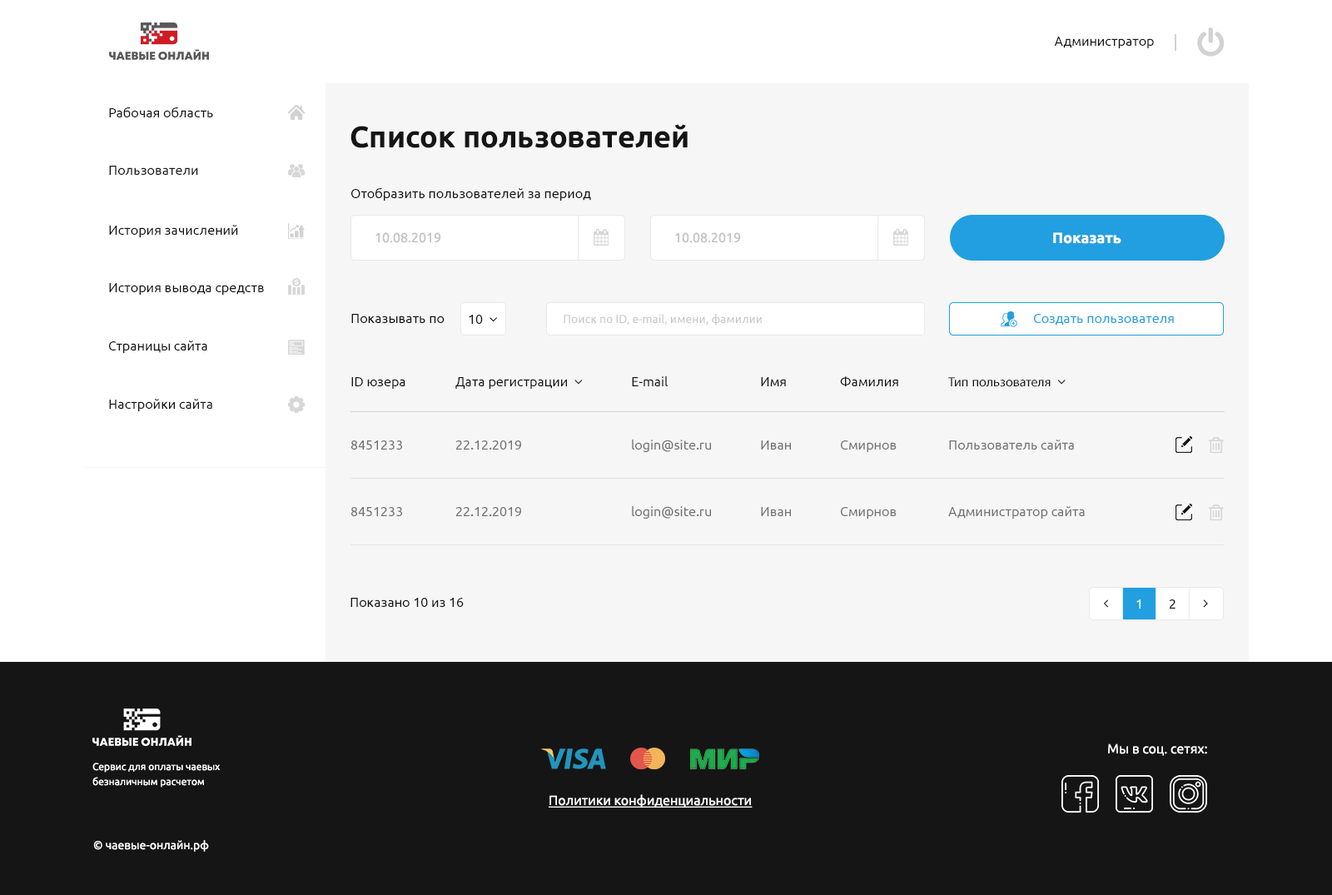
<style>
.page{position:relative;width:1332px;height:895px;background:#f6f6f6}
.page>*{position:absolute;margin:0}
.t1{font:13.3px "Ubuntu-Regular";color:#151515}
.t2{font:30px "Ubuntu-Bold";color:#151515}
.t3{font:13.3px "Ubuntu-Regular";color:#c4c4c4}
.t4{font:15px "Ubuntu-Bold";color:#ffffff}
.t5{font:11.7px "Ubuntu-Regular";color:#c4c4c4}
.t6{font:13.3px "Ubuntu-Regular";color:#219fe0}
.t7{font:13.3px "Ubuntu-Regular";color:#717171}
.t8{font:13.3px "Ubuntu-Regular";color:#727272}
.t9{font:13.3px "Ubuntu-Regular";color:#ffffff}
.t10{font:10px/7.5px "Ubuntu-Regular";color:#ffffff}
.t11{font:13.3px "Ubuntu-Regular";color:#ffffff;text-decoration:underline}
.t12{font:11.7px "Ubuntu-Regular";color:#ffffff}
</style>
<div class="page">
<p class="t1" style="left:1054px;top:37px;width:100px;height:11px">Администратор</p>
<p class="t1" style="left:109px;top:107px;width:104px;height:10px">Рабочая область</p>
<p class="t2" style="left:351px;top:124px;width:337px;height:24px">Список пользователей</p>
<p class="t1" style="left:109px;top:166px;width:89px;height:9px">Пользователи</p>
<p class="t1" style="left:351px;top:187px;width:240px;height:14px">Отобразить пользователей за период</p>
<p class="t1" style="left:109px;top:225px;width:129px;height:12px">История зачислений</p>
<p class="t3" style="left:376px;top:232px;width:65px;height:11px">10.08.2019</p>
<p class="t3" style="left:675px;top:232px;width:66px;height:11px">10.08.2019</p>
<p class="t4" style="left:1053px;top:232px;width:69px;height:12px">Показать</p>
<p class="t1" style="left:109px;top:283px;width:155px;height:12px">История вывода средств</p>
<p class="t1" style="left:351px;top:314px;width:94px;height:9px">Показывать по</p>
<p class="t5" style="left:564px;top:314px;width:198px;height:12px">Поиск по ID, e-mail, имени, фамилии</p>
<p class="t6" style="left:1034px;top:314px;width:140px;height:12px">Создать пользователя</p>
<p class="t1" style="left:109px;top:341px;width:98px;height:12px">Страницы сайта</p>
<p class="t1" style="left:351px;top:377px;width:54px;height:12px">ID юзера</p>
<p class="t1" style="left:632px;top:376px;width:36px;height:10px">E-mail</p>
<p class="t1" style="left:761px;top:377px;width:25px;height:9px">Имя</p>
<p class="t1" style="left:840px;top:376px;width:58px;height:10px">Фамилия</p>
<p class="t1" style="left:109px;top:399px;width:103px;height:12px">Настройки сайта</p>
<p class="t7" style="left:351px;top:440px;width:51px;height:10px">8451233</p>
<p class="t8" style="left:455px;top:440px;width:66px;height:10px">22.12.2019</p>
<p class="t8" style="left:632px;top:439px;width:79px;height:13px">login@site.ru</p>
<p class="t8" style="left:761px;top:440px;width:30px;height:10px">Иван</p>
<p class="t8" style="left:841px;top:440px;width:56px;height:12px">Смирнов</p>
<p class="t8" style="left:949px;top:440px;width:125px;height:10px">Пользователь сайта</p>
<p class="t7" style="left:351px;top:507px;width:51px;height:9px">8451233</p>
<p class="t8" style="left:455px;top:507px;width:66px;height:9px">22.12.2019</p>
<p class="t8" style="left:632px;top:505px;width:79px;height:14px">login@site.ru</p>
<p class="t8" style="left:761px;top:507px;width:30px;height:9px">Иван</p>
<p class="t8" style="left:841px;top:507px;width:56px;height:12px">Смирнов</p>
<p class="t8" style="left:948px;top:506px;width:137px;height:13px">Администратор сайта</p>
<p class="t1" style="left:351px;top:598px;width:113px;height:9px">Показано 10 из 16</p>
<p class="t9" style="left:1137px;top:599px;width:4px;height:10px">1</p>
<p class="t1" style="left:1169px;top:599px;width:7px;height:10px">2</p>
<p class="t9" style="left:1108px;top:744px;width:99px;height:12px">Мы в соц. сетях:</p>
<p class="t10" style="left:92px;top:763px;width:129px;height:25px">Сервис для оплаты чаевых<br><br>безналичным расчетом</p>
<p class="t11" style="left:549px;top:794px;width:204px;height:14px">Политики конфиденциальности</p>
<p class="t12" style="left:93px;top:840px;width:116px;height:12px">© чаевые-онлайн.рф</p>
</div>
